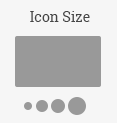
<style>
.page{position:relative;width:117px;height:123px;background:#f6f6f6}
.page>*{position:absolute;margin:0}
.t1{font:14px "RobotoSlab-Regular";color:#454545}
</style>
<div class="page">
<p class="t1" style="left:30px;top:11px;width:60px;height:11px">Icon Size</p>
</div>
